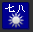
<style>
.page{position:relative;width:33px;height:32px;background:#000090}
.page>*{position:absolute;margin:0}
.t1{font:10.4px "SimSun";color:#ffffff}
</style>
<div class="page">
<p class="t1" style="left:5px;top:4px;width:20px;height:9px">七八</p>
</div>
